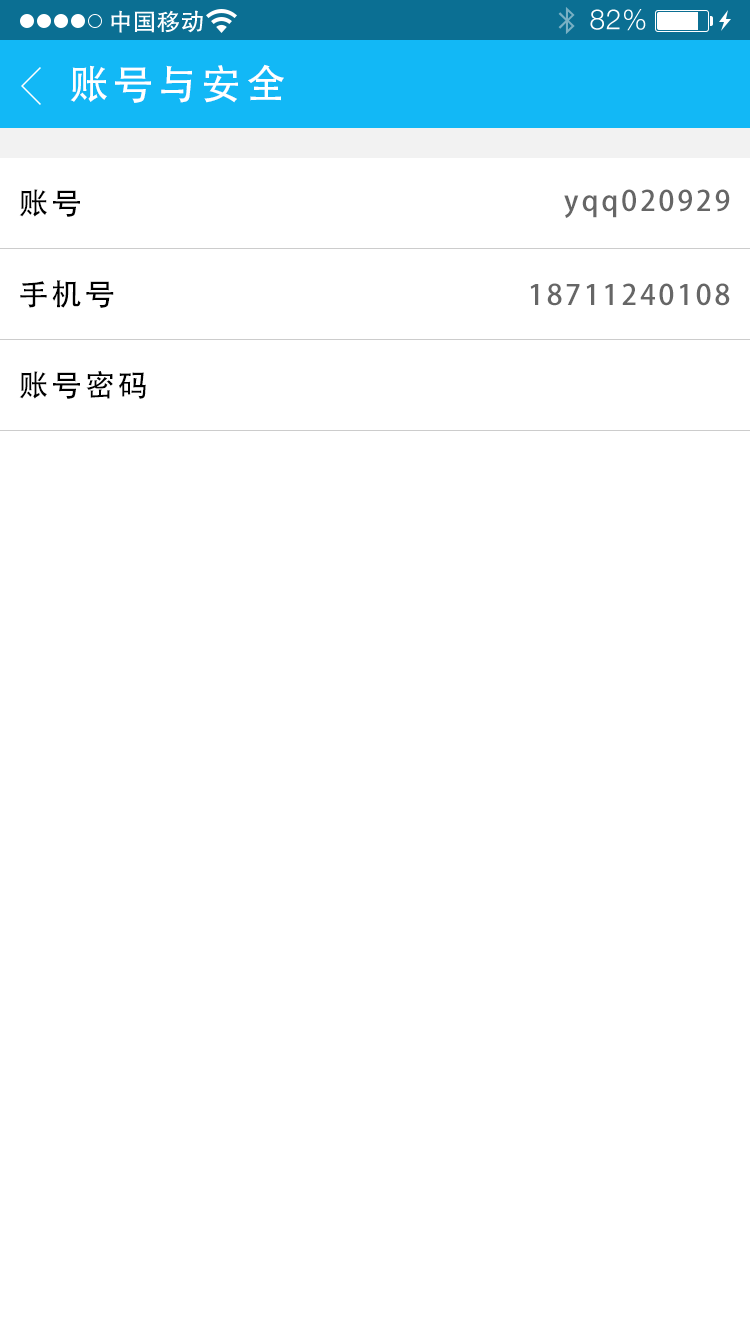
<style>
.page{position:relative;width:750px;height:1334px;background:#ffffff}
.page>*{position:absolute;margin:0}
.t1{font:40px "AdobeHeitiStd-Regular";letter-spacing:0.104em;color:#ffffff}
.t2{font:30px "AdobeHeitiStd-Regular";letter-spacing:0.104em;color:#000000}
.t3{font:28px "AdobeHeitiStd-Regular";letter-spacing:0.104em;color:#666666}
</style>
<div class="page">
<p class="t1" style="left:70px;top:64px;width:214px;height:39px">账号与安全</p>
<p class="t2" style="left:19px;top:189px;width:61px;height:28px">账号</p>
<p class="t3" style="left:564px;top:189px;width:166px;height:29px">yqq020929</p>
<p class="t2" style="left:20px;top:280px;width:94px;height:28px">手机号</p>
<p class="t3" style="left:530px;top:283px;width:200px;height:23px">18711240108</p>
<p class="t2" style="left:19px;top:371px;width:127px;height:28px">账号密码</p>
</div>
